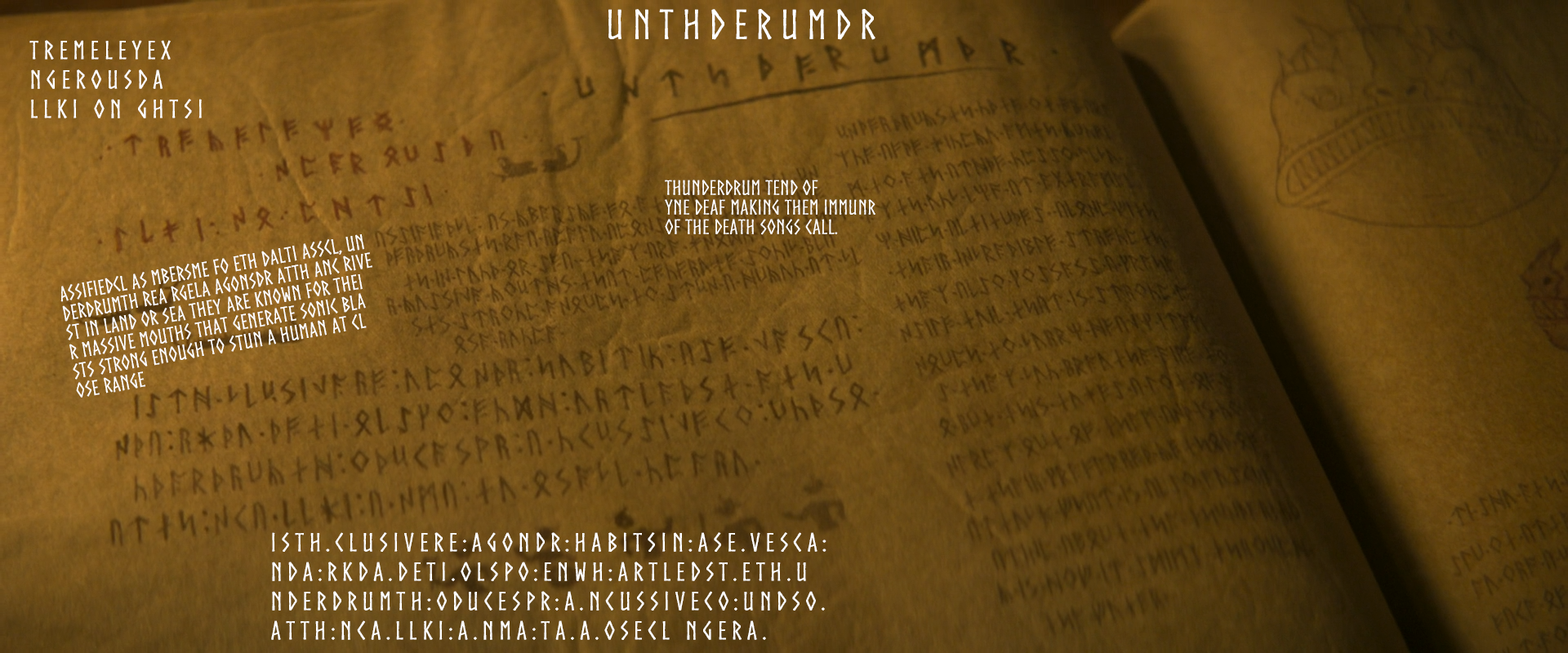
<style>
.page{position:relative;width:1568px;height:653px}
.page>*{position:absolute;margin:0}
.t1{font:39.2px "Norse";letter-spacing:0.2em;color:#ffffff;font-weight:bold}
.t2{font:24.5px/29.4px "Norse";letter-spacing:0.2em;color:#ffffff;font-weight:bold}
.t3{font:19.6px/19.6px "Norse";color:#ffffff;font-weight:bold}
</style>
<div class="page">
<p class="t1" style="left:608px;top:9px;width:267px;height:31px">unthderumdr</p>
<p class="t2" style="left:29px;top:40px;width:173px;height:78px">tremeleyex<br>ngerousda<br>llki on ghtsi</p>
<p class="t3" style="left:665px;top:180px;width:210px;height:55px">thunderdrum tend of<br>yne deaf making them immunr<br>of the death songs call.</p>
<p class="t3" style="left:60px;top:234px;width:312px;height:164px;rotate:-10deg">assifiedcl as mbersme fo eth dalti asscl, un<br>derdrumth rea rgela agonsdr atth anc rive<br>st in land or sea they are known for thei<br>r massive mouths that generate sonic bla<br>sts strong enough to stun a human at cl<br>ose range</p>
<p class="t2" style="left:271px;top:532px;width:555px;height:108px">isTh.clusivere:agondr:habitsin:ase.vesca:<br>nda:rkda.deti.olspo:enWh:artledst.eth.u<br>nderDrumTh:oducespr:a.ncussiveco:undso.<br>atth:nca.llki:a.nma:ta.a.osecl ngera.</p>
</div>
